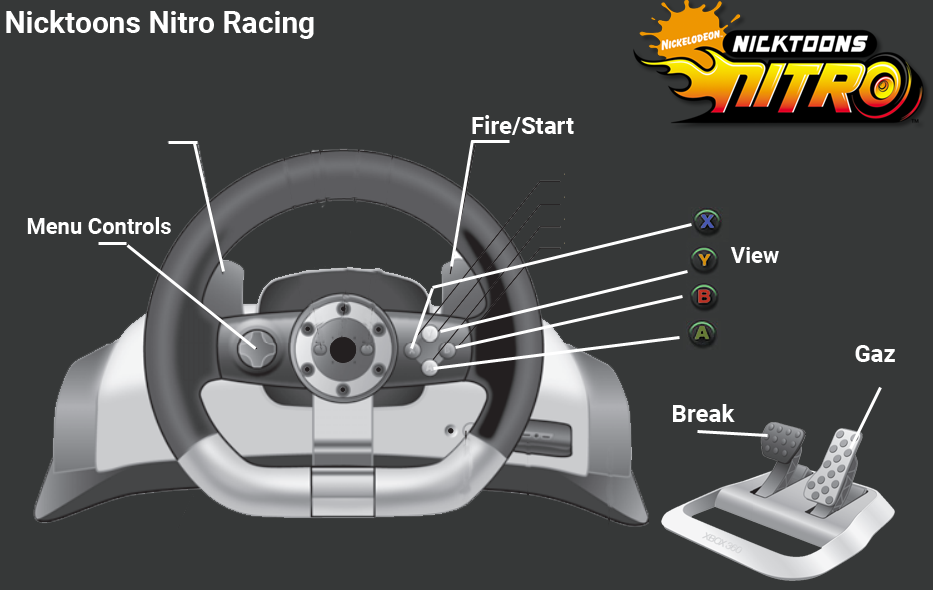
<style>
.page{position:relative;width:933px;height:590px;background:#363838}
.page>*{position:absolute;margin:0}
.t1{font:30px "Roboto-Bold";color:#ffffff}
.t2{font:24px "Roboto-Bold";color:#ffffff}
.t3{font:22px "Roboto-Bold";color:#ffffff}
</style>
<div class="page">
<p class="t1" style="left:6px;top:10px;width:308px;height:29px">Nicktoons Nitro Racing</p>
<p class="t2" style="left:472px;top:115px;width:102px;height:20px">Fire/Start</p>
<p class="t3" style="left:27px;top:217px;width:144px;height:17px">Menu Controls</p>
<p class="t3" style="left:730px;top:247px;width:49px;height:16px">View</p>
<p class="t2" style="left:855px;top:345px;width:40px;height:17px">Gaz</p>
<p class="t2" style="left:673px;top:404px;width:62px;height:18px">Break</p>
</div>
